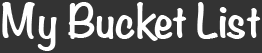
<style>
.page{position:relative;width:262px;height:53px;background:#333333}
.page>*{position:absolute;margin:0}
.t1{font:42px "Noteworthy-Bold";letter-spacing:-0.01em;color:#ffffff}
</style>
<div class="page">
<p class="t1" style="left:2px;top:2px;width:259px;height:49px">My Bucket List</p>
</div>
